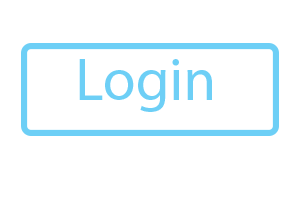
<style>
.page{position:relative;width:300px;height:200px;background:#ffffff}
.page>*{position:absolute;margin:0}
.t1{font:60px "MyriadPro-Regular";color:#6dcff6}
</style>
<div class="page">
<p class="t1" style="left:79px;top:59px;width:133px;height:53px">Login</p>
</div>
